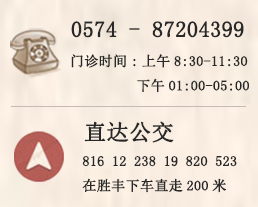
<style>
.page{position:relative;width:258px;height:207px}
.page>*{position:absolute;margin:0}
.t1{font:22px "SimSun";color:#282828;font-weight:bold}
.t2{font:14px "SimSun";color:#282828;font-weight:bold}
</style>
<div class="page">
<p class="t1" style="left:71px;top:21px;width:173px;height:17px">0574 - 87204399</p>
<p class="t2" style="left:71px;top:54px;width:178px;height:39px">门诊时间:上午8:30-11:30<br>         下午01:00-05:00</p>
<p class="t1" style="left:84px;top:121px;width:90px;height:22px">直达公交</p>
<p class="t2" style="left:82px;top:156px;width:155px;height:37px">816 12 238 19 820 523<br>在胜丰下车直走200米</p>
</div>
